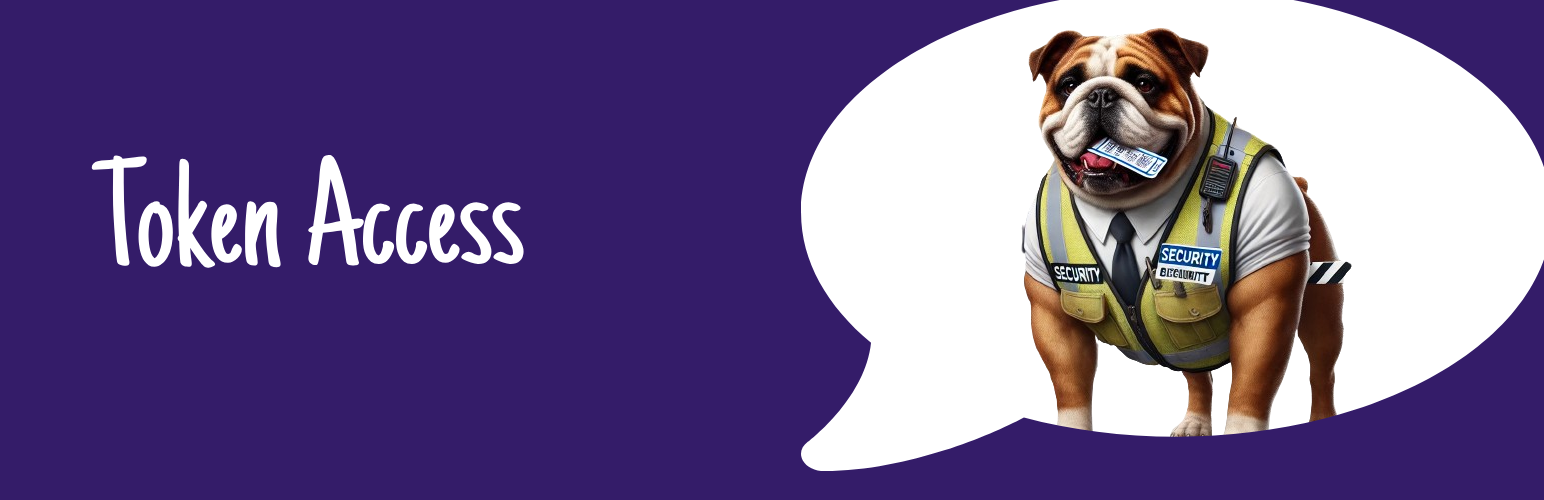
<style>
.page{position:relative;width:1544px;height:500px;background:#341c69}
.page>*{position:absolute;margin:0}
.t1{font:153.8px "JustAnotherHand-Regular";color:#ffffff}
</style>
<div class="page">
<p class="t1" style="left:91px;top:155px;width:433px;height:113px">Token Access</p>
</div>
